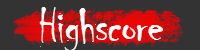
<style>
.page{position:relative;width:200px;height:50px;background:#333333}
.page>*{position:absolute;margin:0}
.t1{font:50px "Chiller-Regular";letter-spacing:-0.025em;color:#ffffff}
</style>
<div class="page">
<p class="t1" style="left:39px;top:7px;width:124px;height:44px">Highscore</p>
</div>
